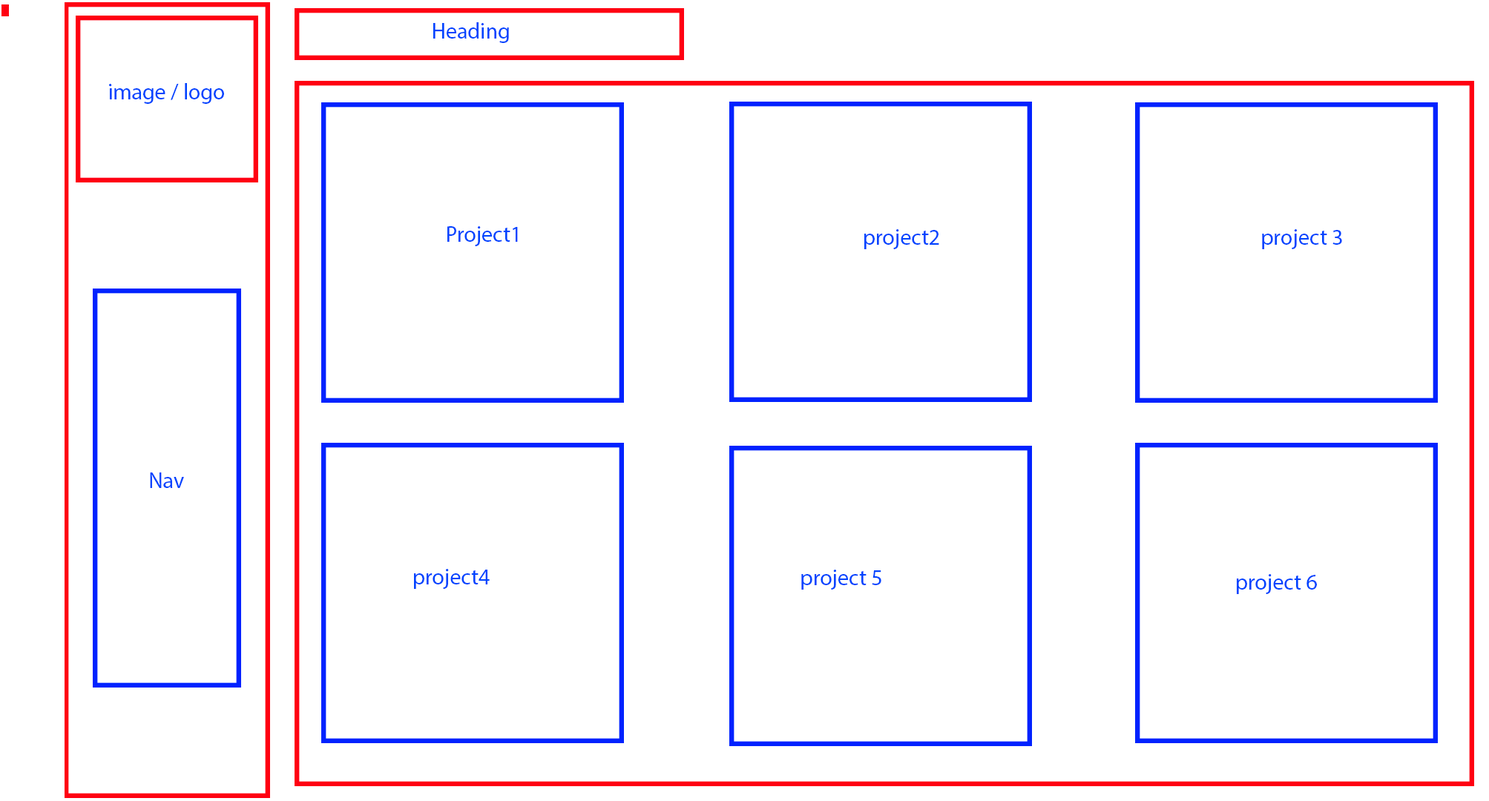
<style>
.page{position:relative;width:1489px;height:801px;background:#ffffff}
.page>*{position:absolute;margin:0}
.t1{font:22.3px "MyriadPro-Regular";color:#0044ff}
</style>
<div class="page">
<p class="t1" style="left:433px;top:22px;width:76px;height:21px">Heading</p>
<p class="t1" style="left:109px;top:83px;width:115px;height:21px">image / logo</p>
<p class="t1" style="left:447px;top:226px;width:71px;height:20px">Project1</p>
<p class="t1" style="left:864px;top:229px;width:75px;height:20px">project2</p>
<p class="t1" style="left:1262px;top:229px;width:80px;height:20px">project 3</p>
<p class="t1" style="left:150px;top:472px;width:34px;height:16px">Nav</p>
<p class="t1" style="left:414px;top:569px;width:76px;height:20px">project4</p>
<p class="t1" style="left:801px;top:570px;width:80px;height:20px">project 5</p>
<p class="t1" style="left:1236px;top:574px;width:81px;height:20px">project 6</p>
</div>
